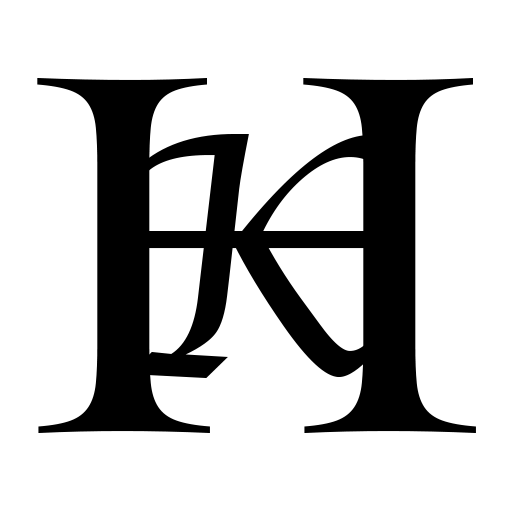
<style>
.page{position:relative;width:512px;height:512px;background:#ffffff}
.page>*{position:absolute;margin:0}
.t1{font:540px "Cochin";color:#000000;scale:1.07 1}
.t2{font:365.3px "Apple-Chancery";color:#000000}
</style>
<div class="page">
<p class="t1" style="left:37px;top:78px;width:439px;height:355px">H</p>
<p class="t2" style="left:109px;top:134px;width:287px;height:244px">K</p>
</div>
